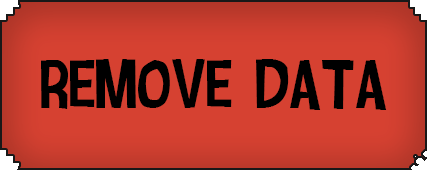
<style>
.page{position:relative;width:427px;height:170px;background:#d64131}
.page>*{position:absolute;margin:0}
.t1{font:90.5px "CartonsixNC";color:#000000}
</style>
<div class="page">
<p class="t1" style="left:41px;top:59px;width:346px;height:51px">Remove Data</p>
</div>
